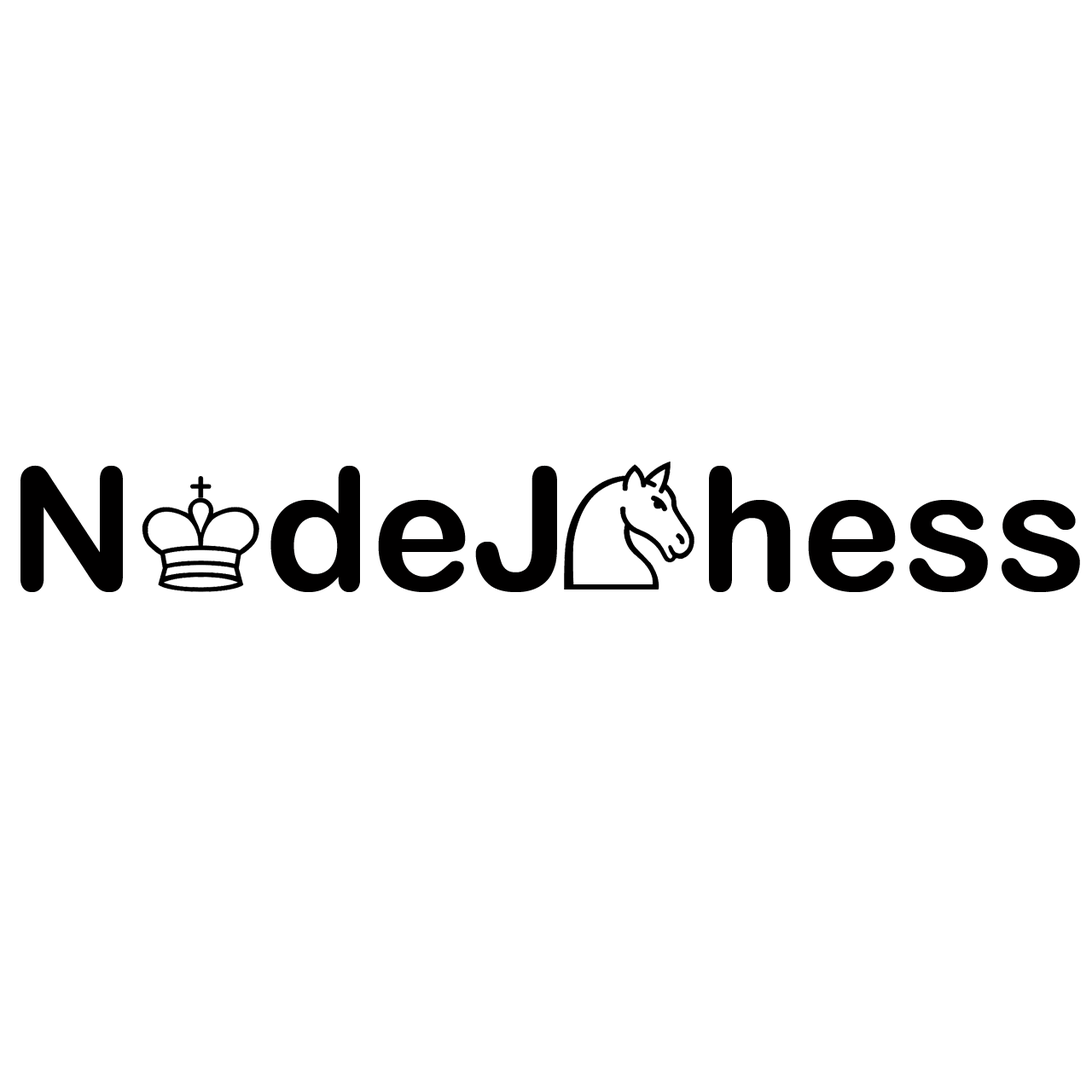
<style>
.page{position:relative;width:1092px;height:1092px;background:#ffffff}
.page>*{position:absolute;margin:0}
.t1{font:170.6px "ArialRoundedMTBold";color:#010000}
</style>
<div class="page">
<p class="t1" style="left:20px;top:465px;width:1060px;height:127px">N   deJ   hess</p>
</div>
